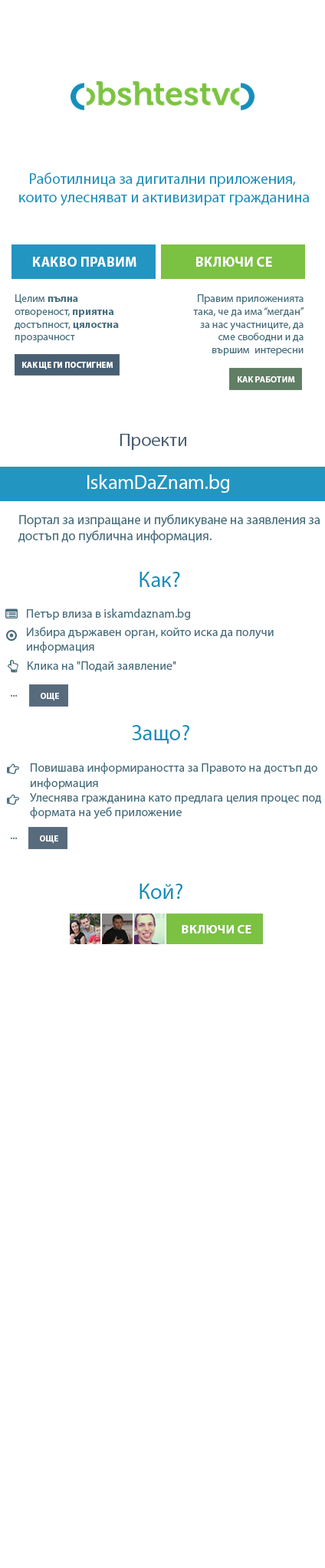
<style>
.page{position:relative;width:325px;height:1568px;background:#ffffff}
.page>*{position:absolute;margin:0}
.t1{font:15.4px "MyriadPro-Regular";color:#168eba}
.t2{font:13.8px "MyriadPro-Bold";color:#ffffff;text-transform:uppercase}
.t3{font:10.7px "MyriadPro-Regular";color:#476f7e}
.t4{font:10.7px "MyriadPro-Bold";color:#476f7e}
.t5{font:8.5px "MyriadPro-Bold";color:#ffffff;text-transform:uppercase;scale:0.97 1}
.t6{font:8.8px "MyriadPro-Bold";color:#ffffff;text-transform:uppercase}
.t7{font:18.3px "MyriadPro-Regular";color:#495f73}
.t8{font:19.7px "MyriadPro-Regular";color:#ffffff}
.t9{font:13.1px "MyriadPro-Regular";color:#476f7e}
.t10{font:21.9px "MyriadPro-Regular";color:#168eba}
.t11{font:12.3px "MyriadPro-Regular";color:#476f7e}
.t12{font:12.3px "MyriadPro-Regular"}
.t13{font:12.6px "MyriadPro-Bold";color:#ffffff;text-transform:uppercase}
</style>
<div class="page">
<p class="t1" style="left:19px;top:172px;width:290px;height:34px;text-align:center">Работилница за дигитални приложения, <br>които улесняват и активизират гражданина</p>
<p class="t2" style="left:33px;top:257px;width:103px;height:10px">Какво правим</p>
<p class="t2" style="left:196px;top:257px;width:76px;height:10px">Включи се</p>
<p class="t3" style="left:15px;top:294px;width:104px;height:49px">Целим <span class="t4">пълна </span>отвореност, <span class="t4">приятна </span>достъпност, <span class="t4">цялостна </span>прозрачност</p>
<p class="t3" style="left:193px;top:294px;width:111px;height:62px;text-align:right">Правим приложенията така, че да има “мегдан” за нас участниците, да сме свободни и да вършим  интересни неща</p>
<p class="t5" style="left:22px;top:362px;width:91px;height:7px">как ЩЕ ГИ ПОСТИГНЕМ</p>
<p class="t6" style="left:238px;top:376px;width:57px;height:6px">как работим</p>
<p class="t7" style="left:120px;top:434px;width:66px;height:16px">Проекти</p>
<p class="t8" style="left:87px;top:474px;width:142px;height:19px">IskamDaZnam.bg</p>
<p class="t9" style="left:18px;top:514px;width:302px;height:29px">Портал за изпращане и публикуване на заявления за достъп до публична информация.</p>
<p class="t10" style="left:139px;top:572px;width:41px;height:15px">Как?</p>
<p class="t11" style="left:27px;top:609px;width:163px;height:11px">Петър влиза в iskamdaznam.bg</p>
<p class="t11" style="left:27px;top:627px;width:247px;height:26px">Избира държавен орган, който иска да получи информация</p>
<p class="t11" style="left:28px;top:661px;width:148px;height:11px">Клика на "Подай заявление"</p>
<p class="t12" style="left:10px;top:694px;width:8px;height:3px">...</p>
<p class="t6" style="left:41px;top:693px;width:18px;height:7px">Oще</p>
<p class="t10" style="left:132px;top:725px;width:57px;height:19px">Защо?</p>
<p class="t11" style="left:30px;top:763px;width:291px;height:56px">Повишава информираността за Правото на достъп до информация<br>Улеснява гражданина като предлага целия процес под формата на уеб приложение</p>
<p class="t12" style="left:10px;top:837px;width:8px;height:2px">...</p>
<p class="t6" style="left:40px;top:835px;width:18px;height:8px">Oще</p>
<p class="t10" style="left:139px;top:884px;width:43px;height:15px">Кой?</p>
<p class="t13" style="left:182px;top:925px;width:69px;height:8px">Включи се</p>
</div>
